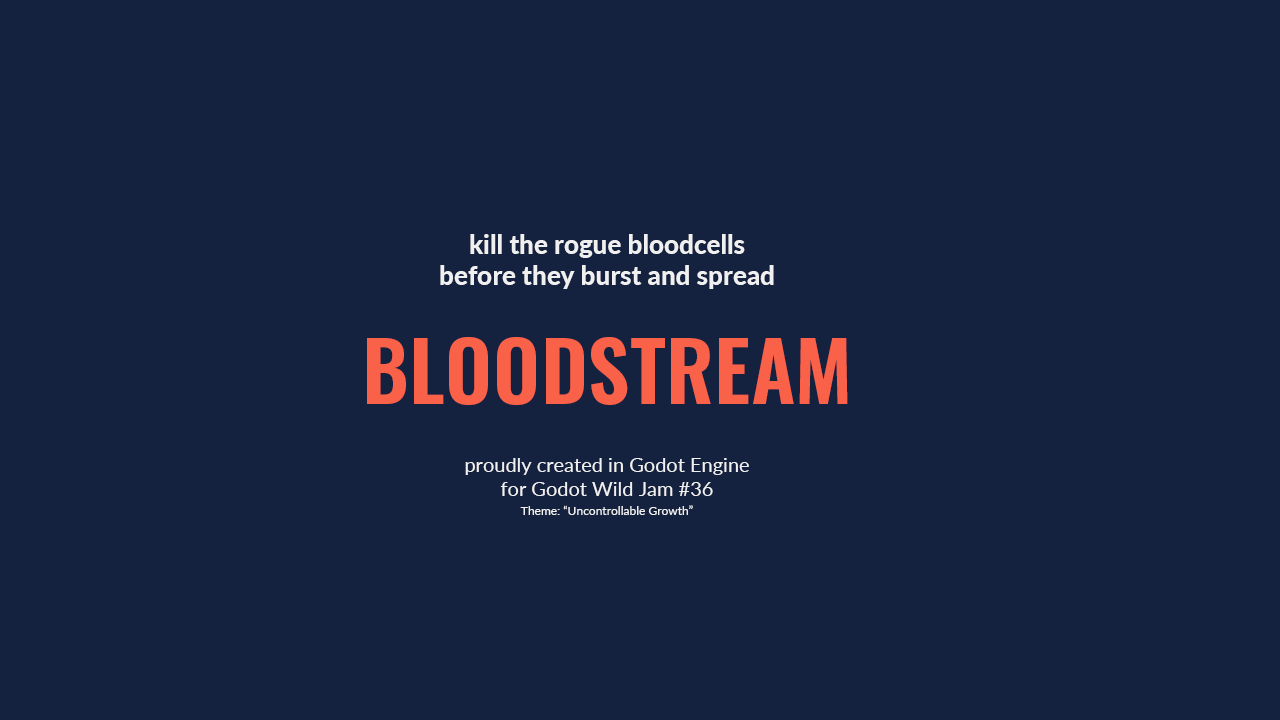
<style>
.page{position:relative;width:1280px;height:720px;background:#142240}
.page>*{position:absolute;margin:0}
.t1{font:26px/31px "Lato-Heavy";color:#f0f0f0}
.t2{font:82px "Oswald-SemiBold";letter-spacing:0.005em;color:#fa6149}
.t3{font:20px/24px "Lato-Regular";color:#f0f0f0}
.t4{font:12px/19px "Lato-Regular";color:#f0f0f0}
</style>
<div class="page">
<p class="t1" style="left:440px;top:234px;width:334px;height:55px;text-align:justify">kill the rogue bloodcells<br>before they burst and spread</p>
<p class="t2" style="left:367px;top:337px;width:481px;height:68px">BLOODSTREAM</p>
<p class="t3" style="left:465px;top:458px;width:284px;height:57px;text-align:justify">proudly created in Godot Engine <br>for Godot Wild Jam #36<br><span class="t4">Theme: “Uncontrollable Growth”</span></p>
</div>
